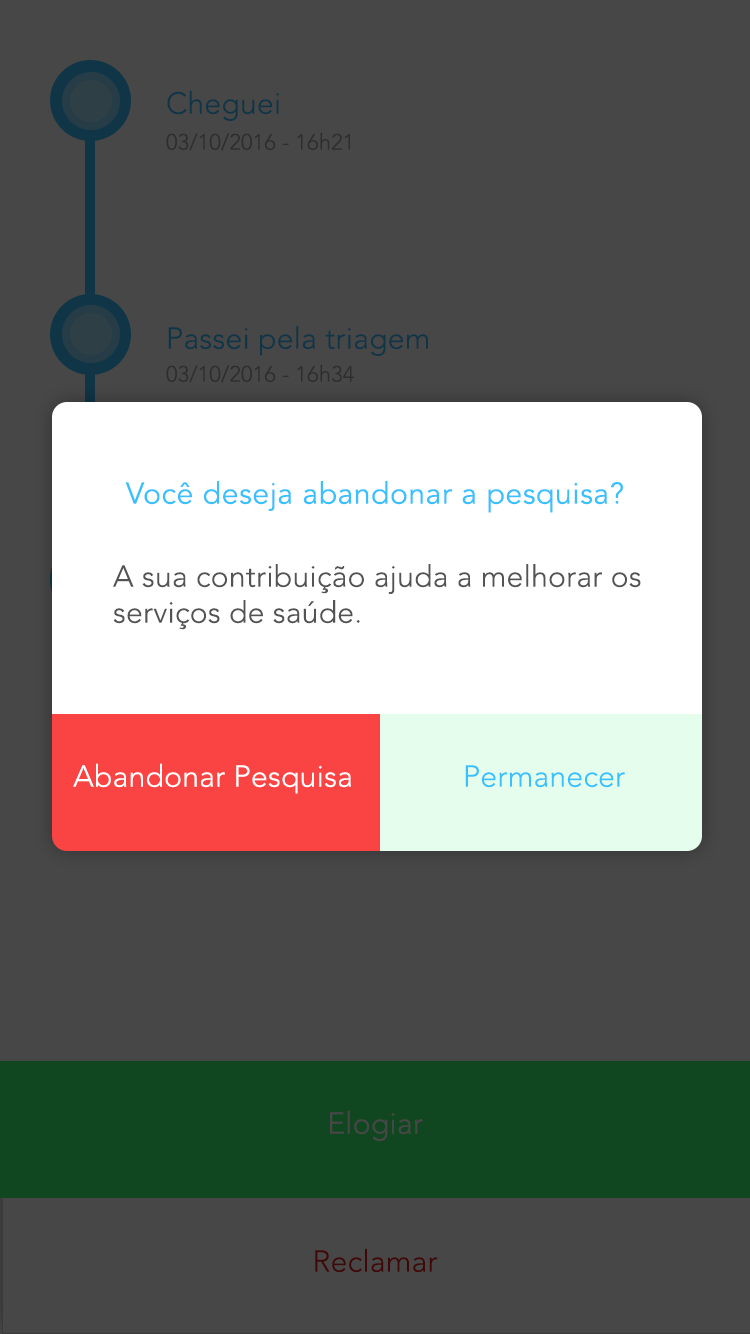
<style>
.page{position:relative;width:750px;height:1334px;background:#474747}
.page>*{position:absolute;margin:0}
.t1{font:30px "AvenirLTStd-Light";letter-spacing:0.01em;color:#103547}
.t2{font:22px "AvenirLTStd-Light";letter-spacing:0.01em;color:#2d2e2e}
.t3{font:30px "AvenirLTStd-Book";letter-spacing:0.02em;color:#39c0ff}
.t4{font:30px "AvenirLTStd-Light";letter-spacing:0.01em;color:#535354}
.t5{font:30px "AvenirLTStd-Light";letter-spacing:0.01em;color:#ffffff}
.t6{font:30px "AvenirLTStd-Light";letter-spacing:0.01em;color:#39c0ff}
.t7{font:30px "AvenirLTStd-Light";letter-spacing:0.01em;color:#474747}
.t8{font:30px "AvenirLTStd-Light";letter-spacing:0.01em;color:#410707}
</style>
<div class="page">
<p class="t1" style="left:167px;top:90px;width:112px;height:31px">Cheguei</p>
<p class="t2" style="left:166px;top:132px;width:184px;height:19px">03/10/2016 - 16h21</p>
<p class="t1" style="left:168px;top:325px;width:260px;height:31px">Passei pela triagem</p>
<p class="t2" style="left:166px;top:364px;width:188px;height:19px">03/10/2016 - 16h34</p>
<p class="t3" style="left:125px;top:481px;width:498px;height:32px">Você deseja abandonar a pesquisa?</p>
<p class="t4" style="left:113px;top:564px;width:528px;height:66px">A sua contribuição ajuda a melhorar os serviços de saúde.</p>
<p class="t5" style="left:73px;top:763px;width:278px;height:31px">Abandonar Pesquisa</p>
<p class="t6" style="left:465px;top:765px;width:160px;height:23px">Permanecer</p>
<p class="t7" style="left:330px;top:1110px;width:93px;height:31px">Elogiar</p>
<p class="t8" style="left:315px;top:1248px;width:123px;height:25px">Reclamar</p>
</div>
